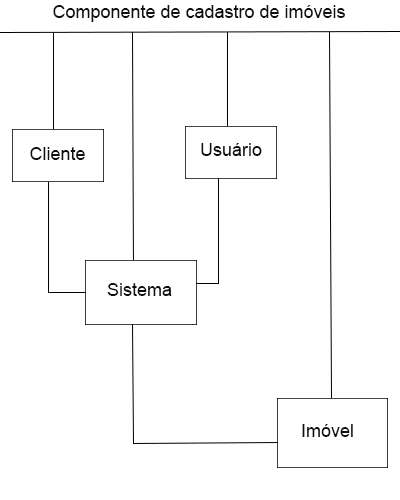
<style>
.page{position:relative;width:400px;height:500px;background:#ffffff}
.page>*{position:absolute;margin:0}
.t1{font:18px "ArialMT";color:#0f0f0f}
</style>
<div class="page">
<p class="t1" style="left:53px;top:5px;width:292px;height:17px">Componente de cadastro de imóveis</p>
<p class="t1" style="left:30px;top:147px;width:55px;height:13px">Cliente</p>
<p class="t1" style="left:201px;top:143px;width:61px;height:13px">Usuário</p>
<p class="t1" style="left:107px;top:283px;width:65px;height:13px">Sistema</p>
<p class="t1" style="left:302px;top:424px;width:51px;height:13px">Imóvel</p>
</div>
